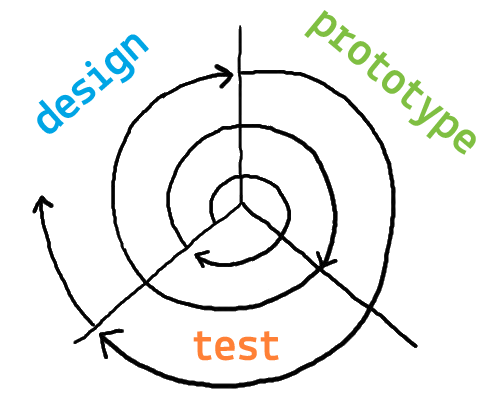
<style>
.page{position:relative;width:500px;height:400px;background:#ffffff}
.page>*{position:absolute;margin:0}
.t1{font:48.1px "Lekton-Bold";color:#7fbf42}
.t2{font:48.1px "Lekton-Bold";color:#00a5e5}
.t3{font:48.1px "Lekton-Bold";color:#ff8036}
</style>
<div class="page">
<p class="t1" style="left:304px;top:10px;width:172px;height:145px;rotate:40deg">prototype</p>
<p class="t2" style="left:37px;top:34px;width:112px;height:100px;rotate:-41deg">design</p>
<p class="t3" style="left:193px;top:331px;width:86px;height:30px;rotate:-1deg">test</p>
</div>
